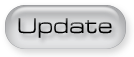
<style>
.page{position:relative;width:134px;height:57px}
.page>*{position:absolute;margin:0}
.t1{font:25px "MetrostyleExtended-Regular";color:#000000}
</style>
<div class="page">
<p class="t1" style="left:18px;top:18px;width:94px;height:20px">Update</p>
</div>
